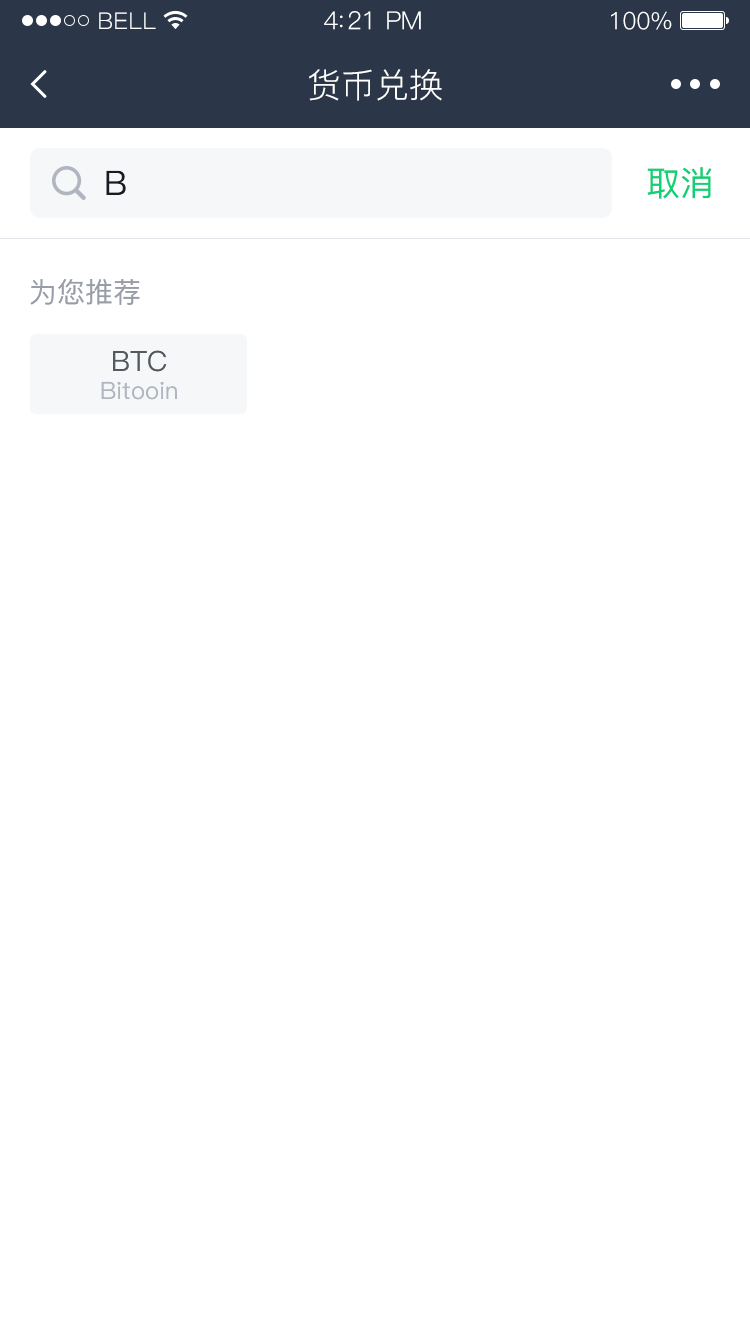
<style>
.page{position:relative;width:750px;height:1334px;background:#ffffff}
.page>*{position:absolute;margin:0}
.t1{font:23px "PingFang-SC-Regular";letter-spacing:0.02em;color:#ffffff}
.t2{font:25px "PingFang-SC-Regular";letter-spacing:-0.02em;color:#ffffff}
.t3{font:24px "PingFang-SC-Regular";letter-spacing:-0.02em;color:#ffffff}
.t4{font:34px "PingFang-SC-Regular";color:#ffffff}
.t5{font:34px "PingFang-SC-Medium";color:#181b23}
.t6{font:34px "PingFang-SC-Medium";color:#10d078}
.t7{font:28px "PingFang-SC-Medium";color:#999da7}
.t8{font:24px/28px "PingFang-SC-Medium";color:#b1b5bf}
.t9{font:28px/28px "PingFang-SC-Medium";color:#545960}
</style>
<div class="page">
<p class="t1" style="left:99px;top:12px;width:57px;height:17px">BELL</p>
<p class="t2" style="left:324px;top:11px;width:97px;height:19px">4:21 PM</p>
<p class="t3" style="left:611px;top:11px;width:61px;height:19px">100%</p>
<p class="t4" style="left:309px;top:69px;width:133px;height:32px">货币兑换</p>
<p class="t5" style="left:106px;top:170px;width:20px;height:25px">B</p>
<p class="t6" style="left:647px;top:167px;width:65px;height:32px">取消</p>
<p class="t7" style="left:30px;top:279px;width:110px;height:26px">为您推荐</p>
<p class="t8" style="left:101px;top:350px;width:76px;height:50px;text-align:center"><span class="t9">BTC<br></span>Bitooin</p>
</div>
